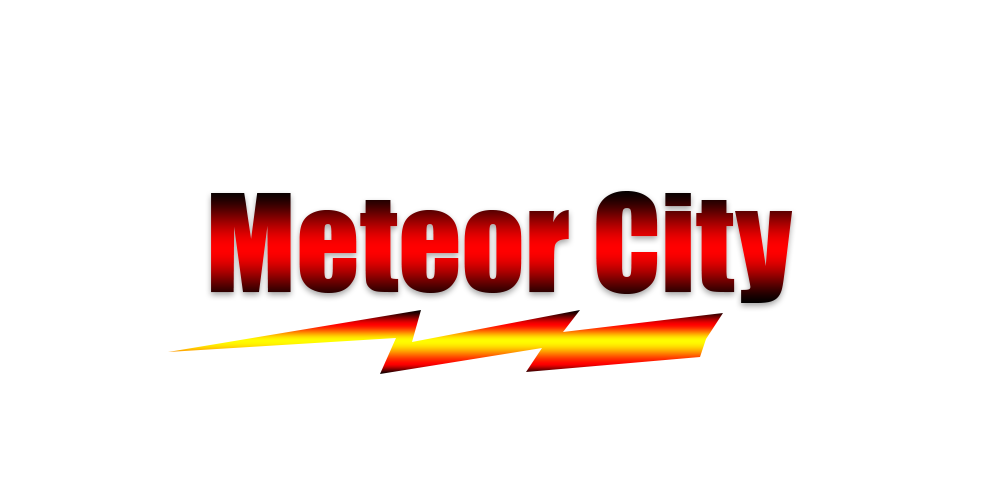
<style>
.page{position:relative;width:1000px;height:500px;background:#ffffff}
.page>*{position:absolute;margin:0}
.t1{font:125px "Impact"}
</style>
<div class="page">
<p class="t1" style="left:211px;top:191px;width:582px;height:112px">Meteor City</p>
</div>
